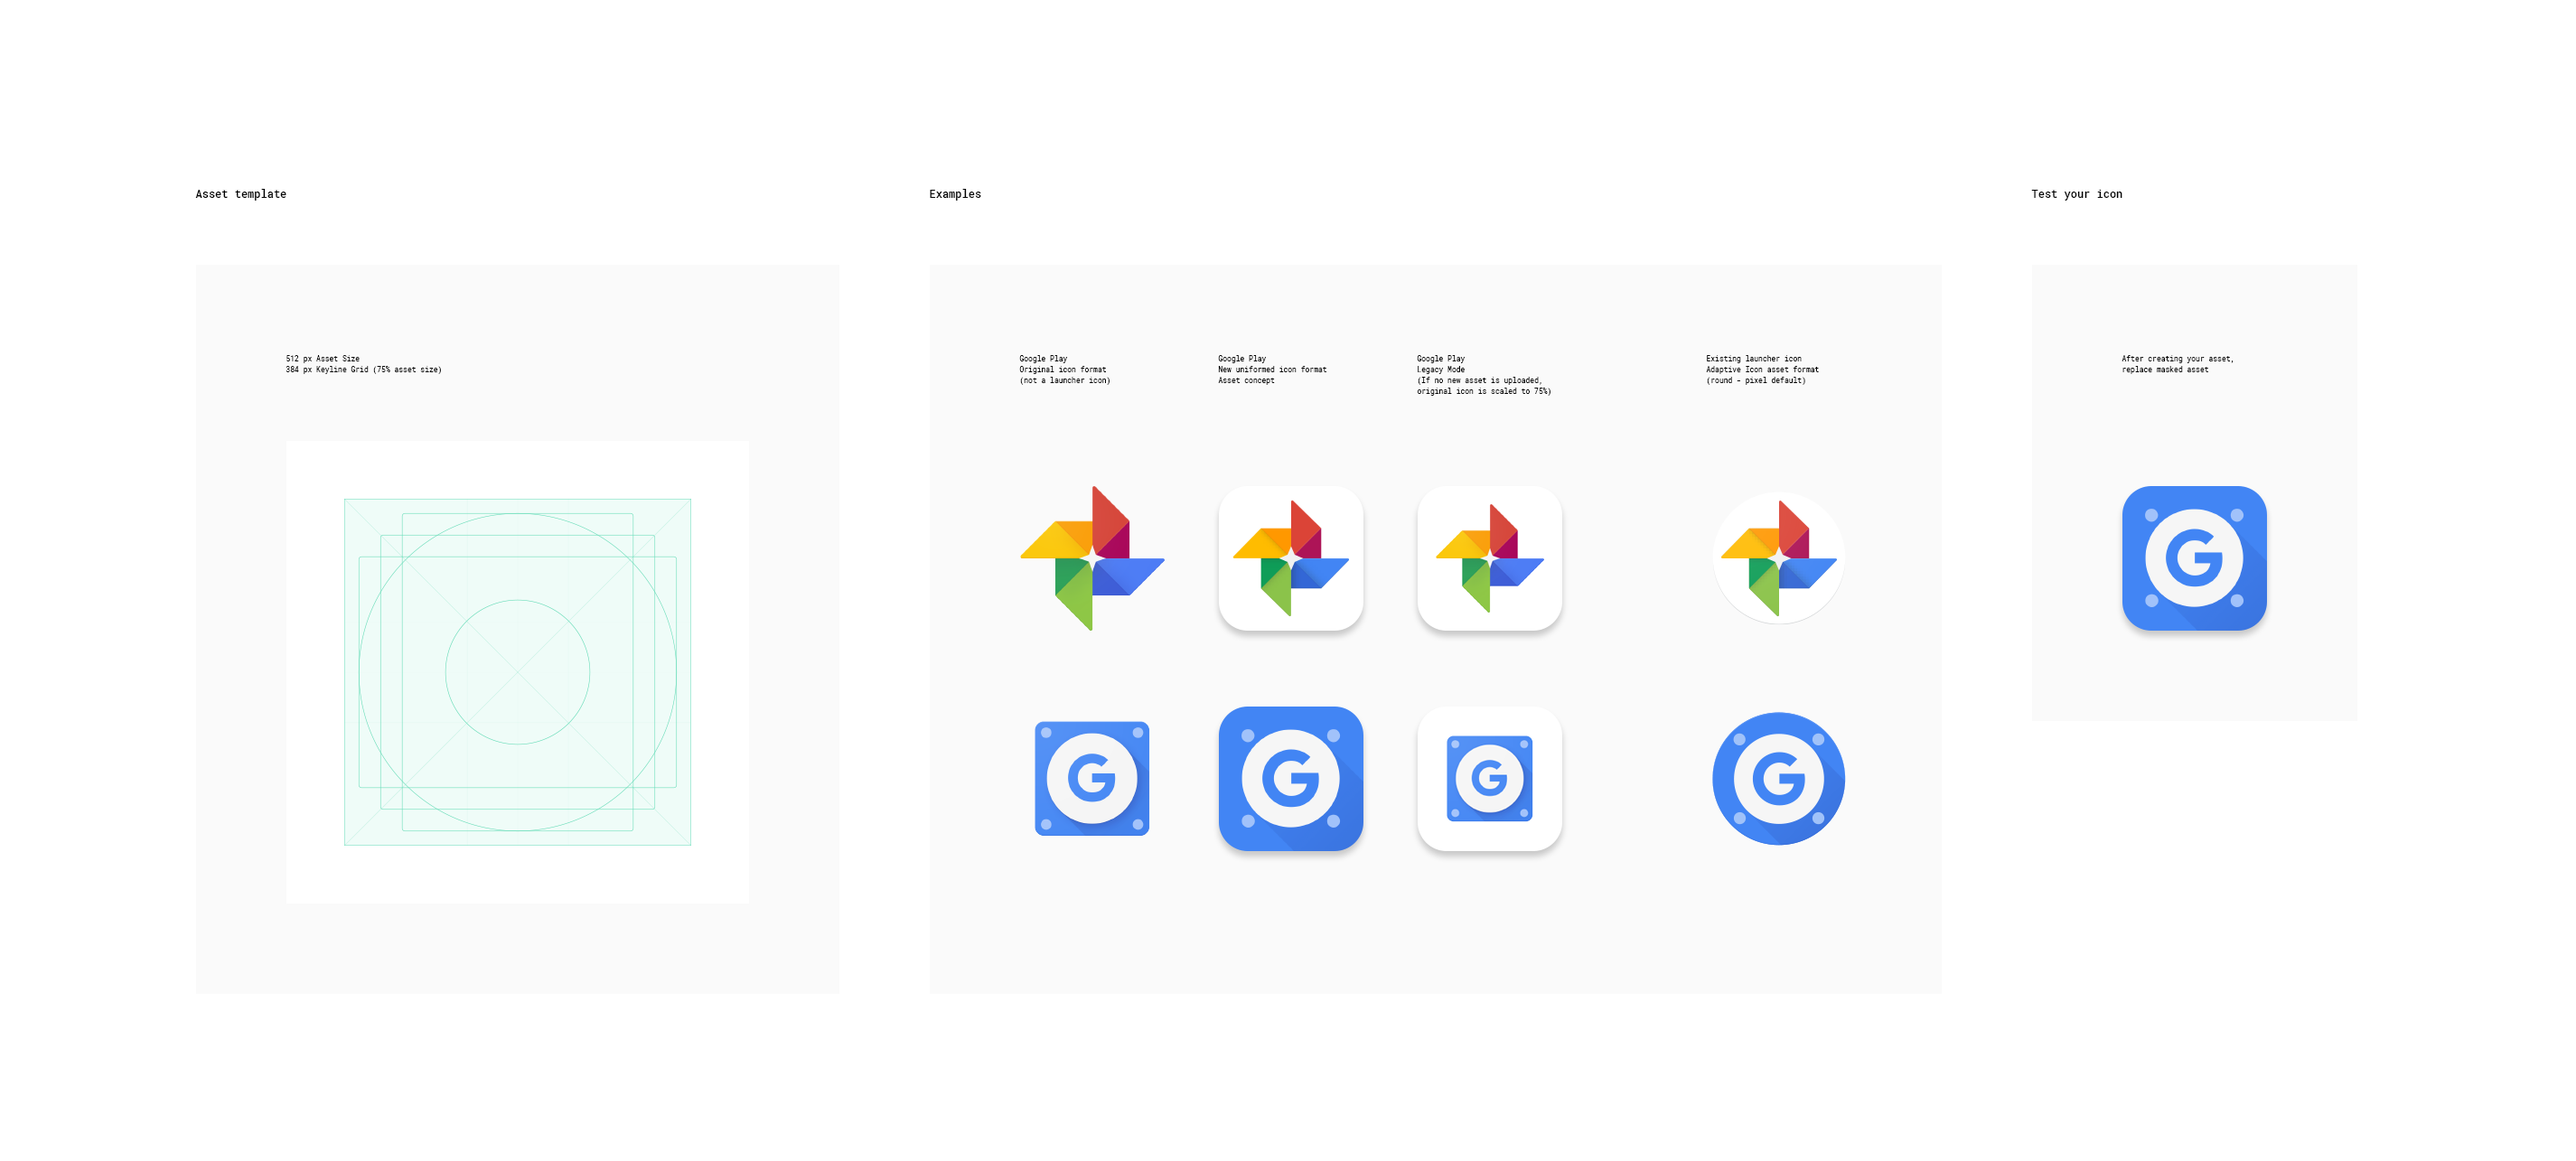
<style>
.page{position:relative;width:2576px;height:1161px;background:#ffffff}
.page>*{position:absolute;margin:0}
.t1{font:10.8px "RobotoMono-Medium";color:#000000}
.t2{font:7.2px/10.8px "RobotoMono-Regular";color:#000000}
</style>
<div class="page">
<p class="t1" style="left:195px;top:189px;width:91px;height:12px">Asset template</p>
<p class="t1" style="left:930px;top:189px;width:51px;height:12px">Examples</p>
<p class="t1" style="left:2031px;top:190px;width:91px;height:11px">Test your icon</p>
<p class="t2" style="left:286px;top:355px;width:155px;height:19px">512 px Asset Size<br>384 px Keyline Grid (75% asset size)</p>
<p class="t2" style="left:1019px;top:355px;width:91px;height:30px">Google Play<br>Original icon format<br>(not a launcher icon)</p>
<p class="t2" style="left:1218px;top:355px;width:108px;height:30px">Google Play<br>New uniformed icon format<br>Asset concept</p>
<p class="t2" style="left:1417px;top:355px;width:133px;height:41px">Google Play<br>Legacy Mode<br>(If no new asset is uploaded,<br>original icon is scaled to 75%)</p>
<p class="t2" style="left:1706px;top:355px;width:113px;height:30px">Existing launcher icon<br>Adaptive Icon asset format<br>(round - pixel default)</p>
<p class="t2" style="left:2122px;top:355px;width:112px;height:19px">After creating your asset,<br>replace masked asset</p>
</div>
